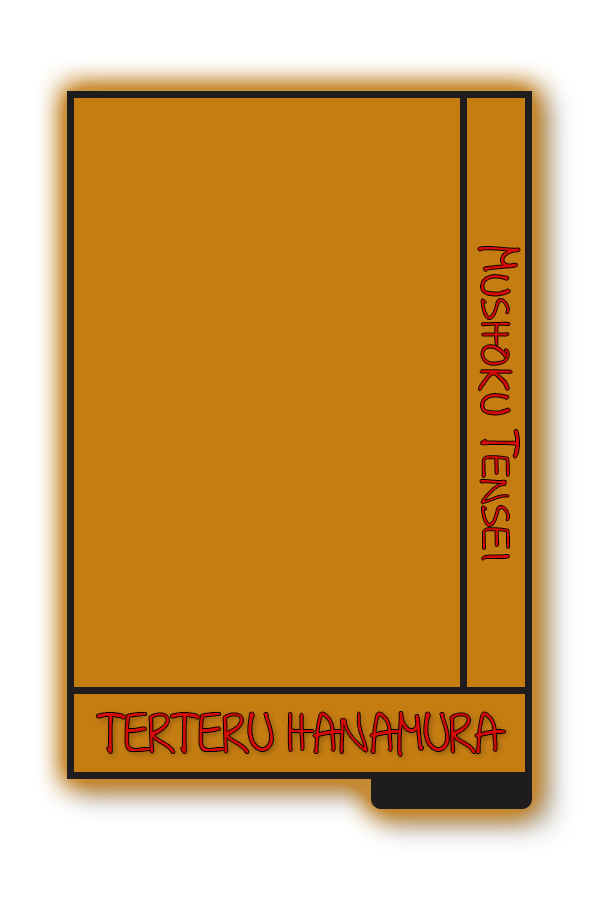
<style>
.page{position:relative;width:600px;height:900px;background:#c57d12}
.page>*{position:absolute;margin:0}
.t1{font:41px "AllCaps";color:#cb1511}
.t2{font:43.2px "AllCaps";color:#cb1511}
</style>
<div class="page">
<p class="t1" style="left:478px;top:247px;width:42px;height:313px;rotate:90deg">Mushoku Tensei</p>
<p class="t2" style="left:97px;top:712px;width:409px;height:44px">TERTERU HANAMURA</p>
</div>
